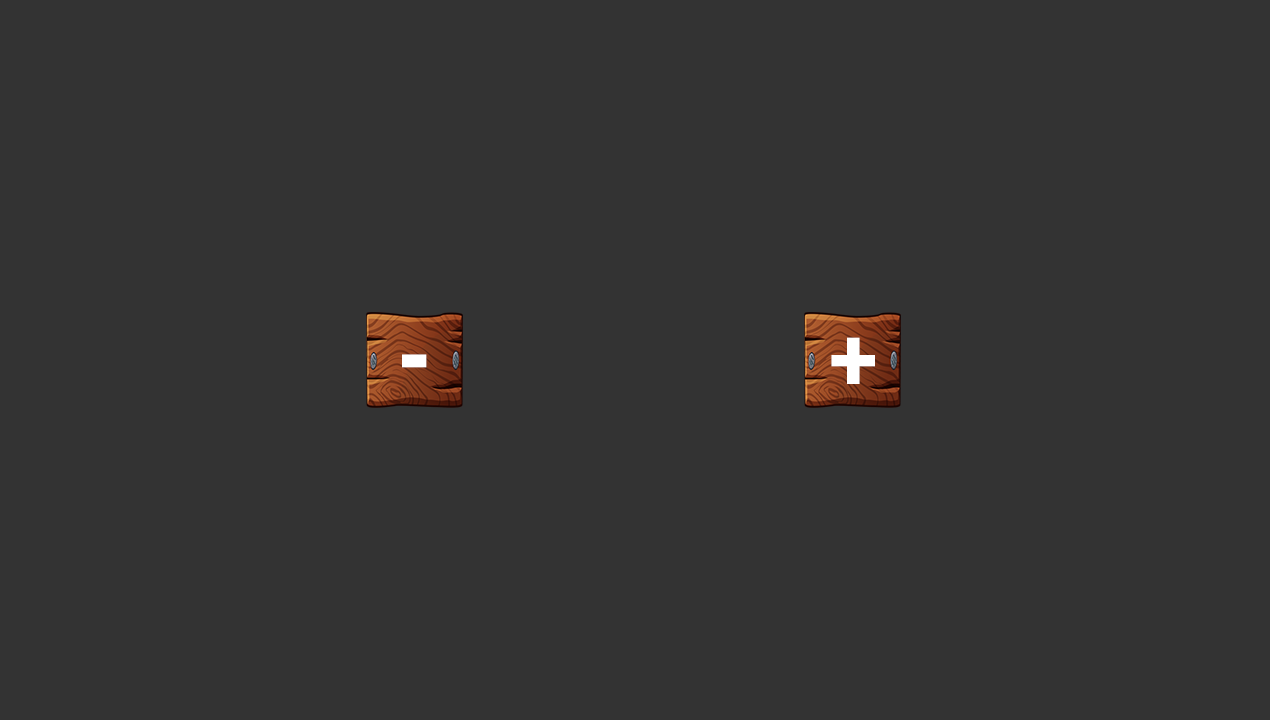
<style>
.page{position:relative;width:1270px;height:720px;background:#333333}
.page>*{position:absolute;margin:0}
.t1{font:91.9px "Futura-CondensedBold";letter-spacing:-0.025em;color:#ffffff;text-transform:uppercase;font-weight:bold}
.t2{font:86.5px "Futura-CondensedBold";letter-spacing:-0.025em;color:#ffffff;text-transform:uppercase;font-weight:bold}
</style>
<div class="page">
<p class="t1" style="left:831px;top:337px;width:44px;height:47px">+</p>
<p class="t2" style="left:402px;top:354px;width:25px;height:14px">-</p>
</div>
